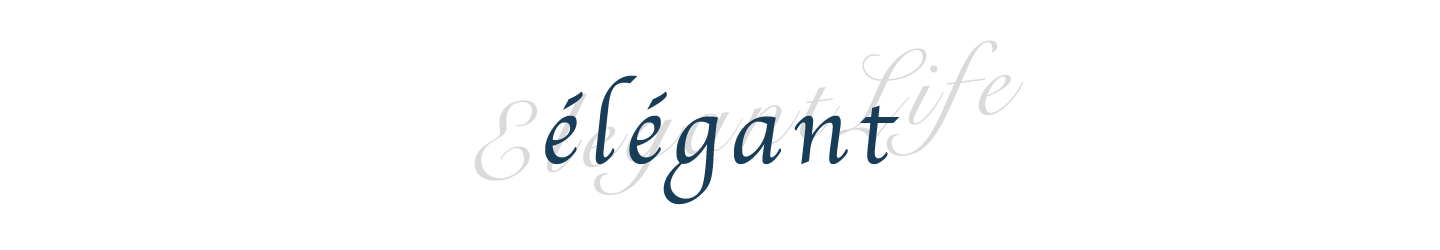
<style>
.page{position:relative;width:1440px;height:250px;background:#ffffff}
.page>*{position:absolute;margin:0}
.t1{font:100.5px "Apple-Chancery";letter-spacing:0.1em;color:#173d58}
</style>
<div class="page">
<p class="t1" style="left:545px;top:75px;width:355px;height:130px">élégant</p>
</div>
